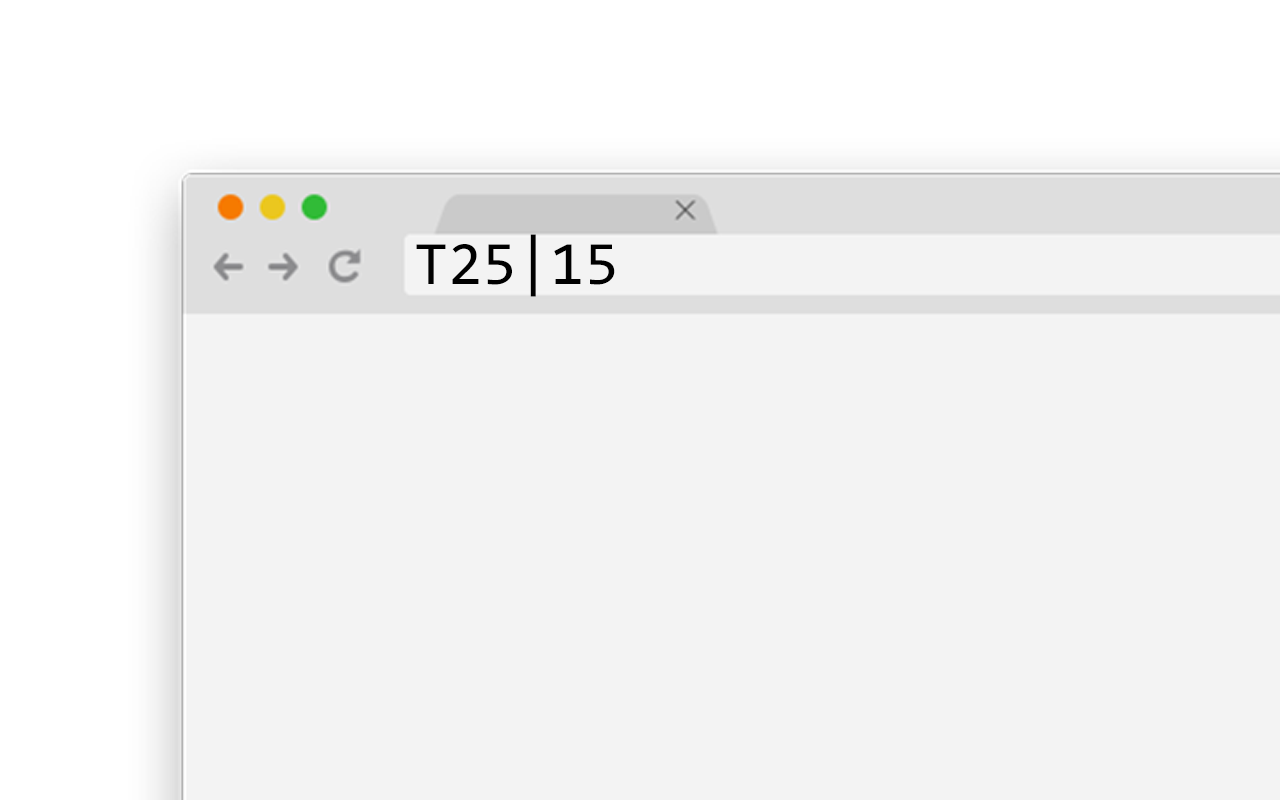
<style>
.page{position:relative;width:1280px;height:800px;background:#f3f3f3}
.page>*{position:absolute;margin:0}
.t1{font:62px "Consolas";color:#000000}
</style>
<div class="page">
<p class="t1" style="left:416px;top:234px;width:199px;height:63px">T25|15</p>
</div>
